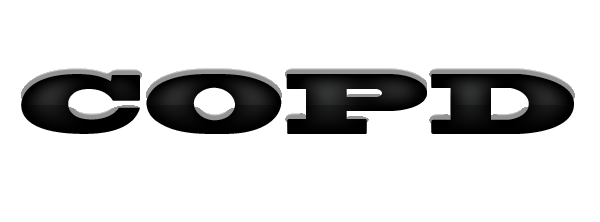
<style>
.page{position:relative;width:600px;height:222px;background:#ffffff}
.page>*{position:absolute;margin:0}
.t1{font:79.4px "BlackoakStd";color:#ffffff}
</style>
<div class="page">
<p class="t1" style="left:21px;top:74px;width:553px;height:60px">COPD</p>
<p class="t1" style="left:21px;top:74px;width:553px;height:60px">COPD</p>
</div>
